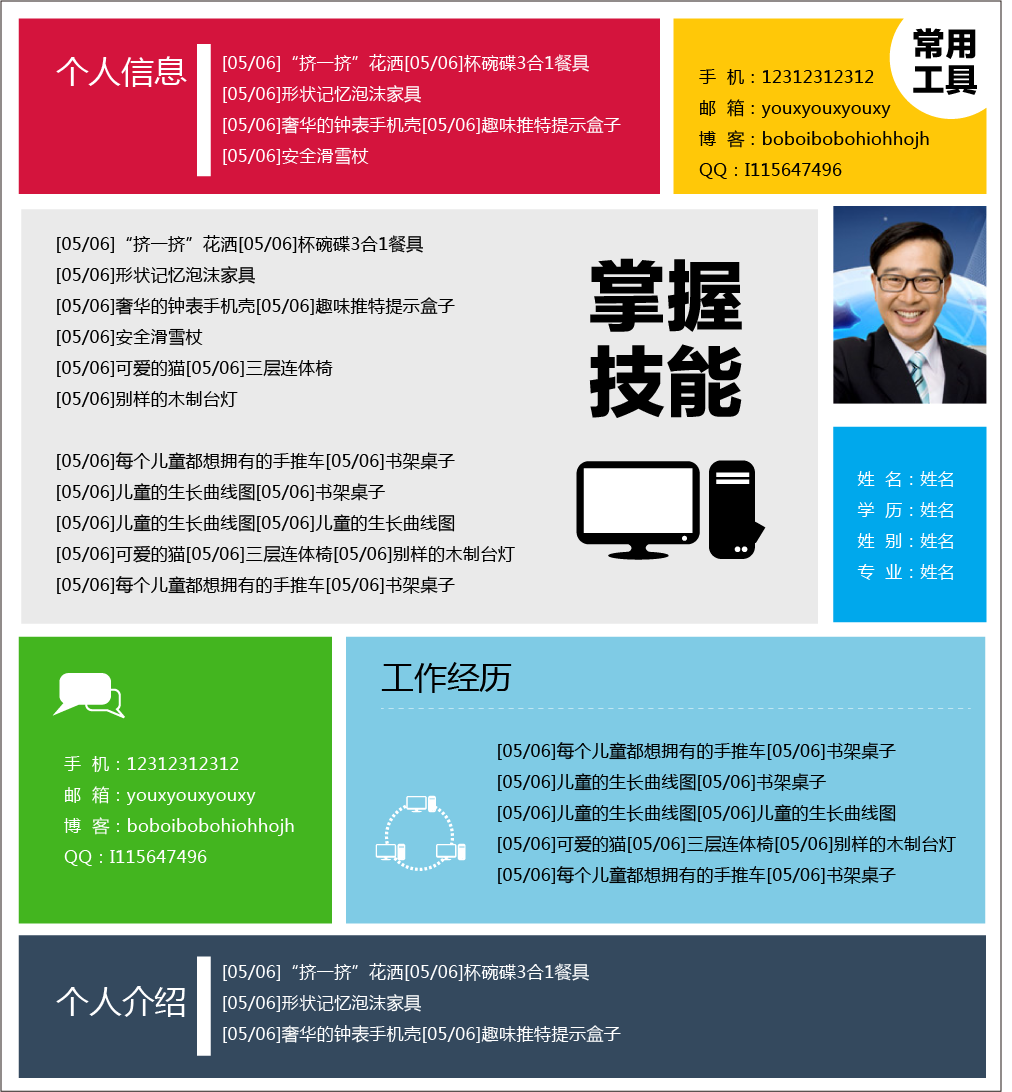
<style>
.page{position:relative;width:1012px;height:1092px;background:#eaeaea}
.page>*{position:absolute;margin:0}
.t1{font:32.9px/36.3px "FZLTTHJW--GB1-0";color:#000000}
.t2{font:17.5px/31px "MicrosoftYaHei";color:#ffffff}
.t3{font:32.7px "MicrosoftYaHei";color:#ffffff}
.t4{font:17.5px/31px "MicrosoftYaHei";color:#000000}
.t5{font:77.9px/86px "FZLTTHJW--GB1-0";color:#000000}
.t6{font:32.7px "MicrosoftYaHei";color:#000000}
</style>
<div class="page">
<p class="t1" style="left:913px;top:28px;width:64px;height:67px">常用<br>工具</p>
<p class="t2" style="left:223px;top:54px;width:398px;height:111px">[05/06]“挤一挤”花洒[05/06]杯碗碟3合1餐具<br>[05/06]形状记忆泡沫家具<br>[05/06]奢华的钟表手机壳[05/06]趣味推特提示盒子<br>[05/06]安全滑雪杖</p>
<p class="t3" style="left:56px;top:56px;width:131px;height:31px">个人信息</p>
<p class="t4" style="left:699px;top:69px;width:230px;height:110px">手  机：12312312312<br>邮  箱：youxyouxyouxy<br>博  客：boboibobohiohhojh<br>QQ：I115647496</p>
<p class="t4" style="left:57px;top:235px;width:458px;height:359px">[05/06]“挤一挤”花洒[05/06]杯碗碟3合1餐具<br>[05/06]形状记忆泡沫家具<br>[05/06]奢华的钟表手机壳[05/06]趣味推特提示盒子<br>[05/06]安全滑雪杖<br>[05/06]可爱的猫[05/06]三层连体椅<br>[05/06]别样的木制台灯<br><br>[05/06]每个儿童都想拥有的手推车[05/06]书架桌子<br>[05/06]儿童的生长曲线图[05/06]书架桌子<br>[05/06]儿童的生长曲线图[05/06]儿童的生长曲线图<br>[05/06]可爱的猫[05/06]三层连体椅[05/06]别样的木制台灯<br>[05/06]每个儿童都想拥有的手推车[05/06]书架桌子</p>
<p class="t5" style="left:589px;top:258px;width:153px;height:160px">掌握<br>技能</p>
<p class="t2" style="left:857px;top:471px;width:96px;height:109px">姓  名：姓名<br>学  历：姓名<br>姓  别：姓名<br>专  业：姓名</p>
<p class="t6" style="left:381px;top:662px;width:131px;height:31px">工作经历</p>
<p class="t4" style="left:498px;top:742px;width:458px;height:142px">[05/06]每个儿童都想拥有的手推车[05/06]书架桌子<br>[05/06]儿童的生长曲线图[05/06]书架桌子<br>[05/06]儿童的生长曲线图[05/06]儿童的生长曲线图<br>[05/06]可爱的猫[05/06]三层连体椅[05/06]别样的木制台灯<br>[05/06]每个儿童都想拥有的手推车[05/06]书架桌子</p>
<p class="t2" style="left:64px;top:756px;width:230px;height:110px">手  机：12312312312<br>邮  箱：youxyouxyouxy<br>博  客：boboibobohiohhojh<br>QQ：I115647496</p>
<p class="t2" style="left:223px;top:963px;width:398px;height:80px">[05/06]“挤一挤”花洒[05/06]杯碗碟3合1餐具<br>[05/06]形状记忆泡沫家具<br>[05/06]奢华的钟表手机壳[05/06]趣味推特提示盒子</p>
<p class="t3" style="left:56px;top:986px;width:129px;height:31px">个人介绍</p>
</div>
